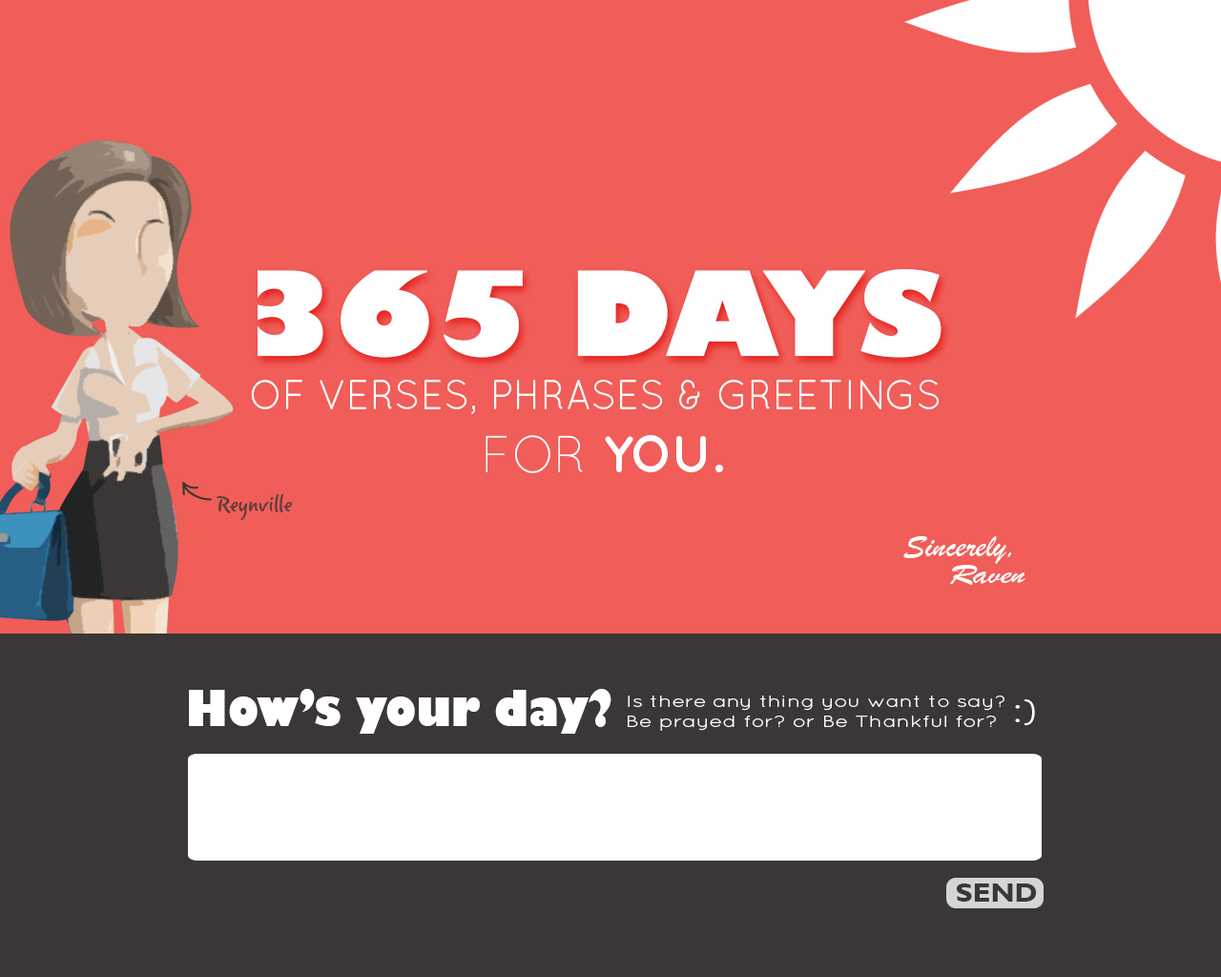
<style>
.page{position:relative;width:1221px;height:977px;background:#f15d58}
.page>*{position:absolute;margin:0}
.t1{font:114.3px "GillSans-UltraBold";color:#ffffff}
.t2{font:41.7px "Quicksand-Regular";color:#ffffff;scale:0.94 1}
.t3{font:51.6px "Quicksand-Bold";color:#ffffff}
.t4{font:51.6px "Quicksand-Light";color:#ffffff}
.t5{font:28px "Romy";color:#5c3e3c;scale:1.04 1}
.t6{font:34.3px "BrushScriptMT";color:#ffffff}
.t7{font:30px "BrushScriptMT";color:#ffffff;scale:1.23 1}
.t8{font:48.9px "GillSans-UltraBold";color:#ffffff;scale:0.88 1}
.t9{font:16.7px "Quicksand-Regular";color:#ffffff;scale:1.31 1}
.t10{font:32.5px "Quicksand-Regular";color:#ffffff;scale:1.26 1}
.t11{font:26.7px "GillSansMT-Bold";color:#3a3736;scale:1.07 1}
</style>
<div class="page">
<p class="t1" style="left:258px;top:269px;width:683px;height:89px">365 DAYS</p>
<p class="t2" style="left:251px;top:379px;width:689px;height:35px">OF VERSES, PHRASES &amp; GREETINGS</p>
<p class="t3" style="left:485px;top:435px;width:238px;height:38px"><span class="t4">FOR</span> YOU.</p>
<p class="t5" style="left:217px;top:494px;width:75px;height:26px">Reynville</p>
<p class="t6" style="left:903px;top:536px;width:108px;height:28px">Sincerely,</p>
<p class="t7" style="left:950px;top:565px;width:75px;height:20px">Raven</p>
<p class="t8" style="left:189px;top:689px;width:422px;height:44px">How’s your day?</p>
<p class="t9" style="left:628px;top:695px;width:376px;height:36px;text-align:right">Is there any thing you want to say?<br>Be prayed for? or Be Thankful for?</p>
<p class="t10" style="left:1015px;top:699px;width:20px;height:27px">:)</p>
<p class="t11" style="left:956px;top:883px;width:81px;height:18px">SEND</p>
</div>
